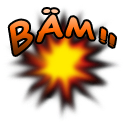
<style>
.page{position:relative;width:128px;height:128px;background:#ffffff}
.page>*{position:absolute;margin:0}
.t1{font:32px "ComicSansMS-Bold"}
</style>
<div class="page">
<p class="t1" style="left:9px;top:9px;width:106px;height:46px">BÄM!!</p>
</div>
